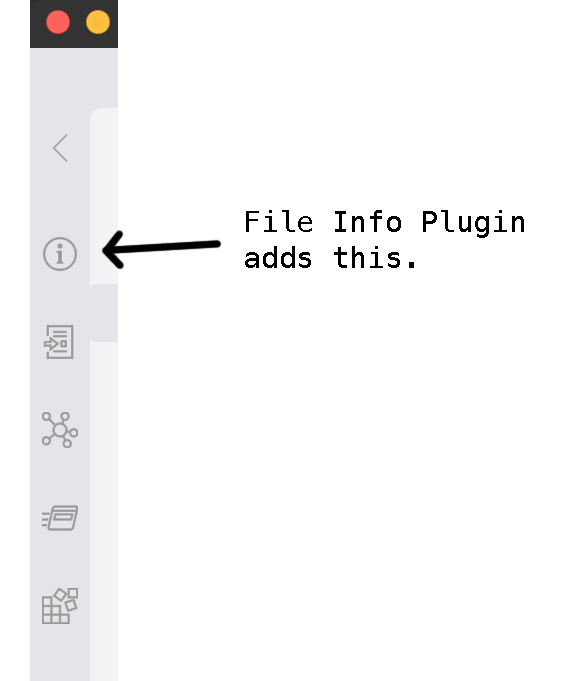
<style>
.page{position:relative;width:569px;height:681px;background:#ffffff}
.page>*{position:absolute;margin:0}
.t1{font:29.4px "Menlo-Regular";color:#000000}
</style>
<div class="page">
<p class="t1" style="left:245px;top:210px;width:279px;height:58px">File Info Plugin<br>adds this.</p>
</div>
